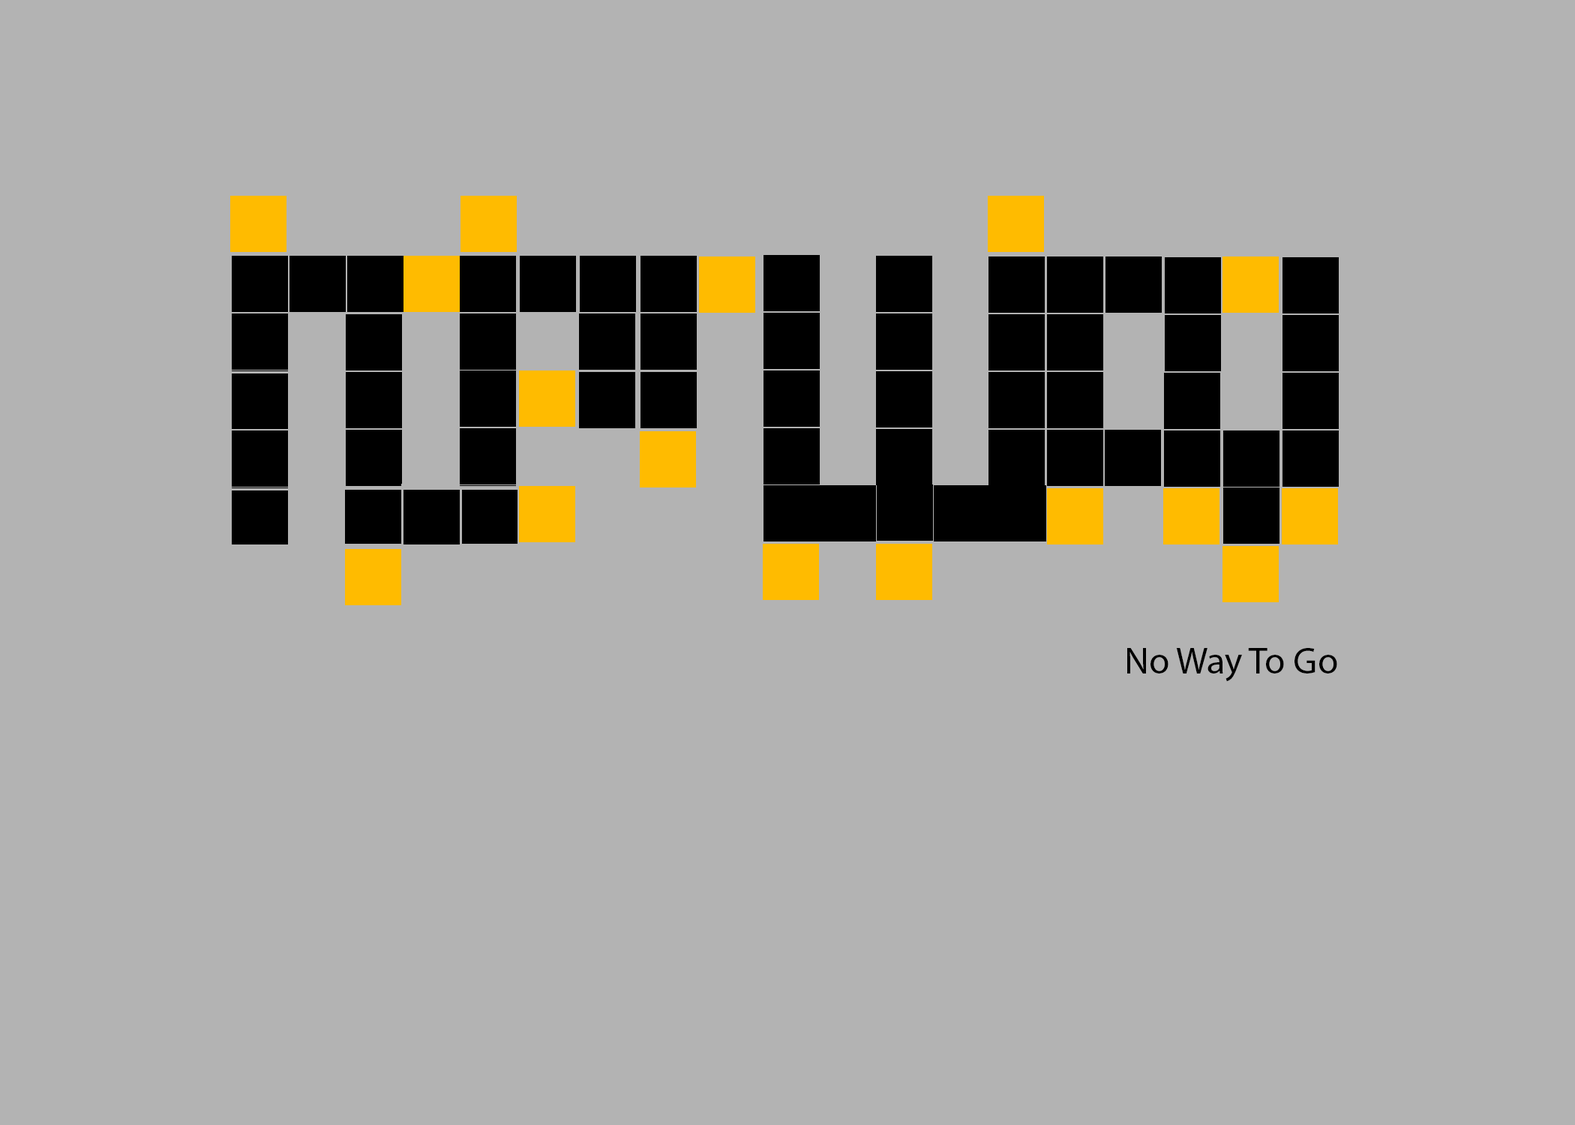
<style>
.page{position:relative;width:1575px;height:1125px;background:#b3b3b3}
.page>*{position:absolute;margin:0}
.t1{font:9px "MyriadPro-Regular";color:#000000}
</style>
<div class="page">
<p class="t1" style="left:1127px;top:648px;width:210px;height:34px;text-align:center">No Way To Go</p>
</div>
